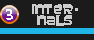
<style>
.page{position:relative;width:94px;height:40px;background:#1b1b1b}
.page>*{position:absolute;margin:0}
.t1{font:12px/11px "Baveuse";color:#cccccc}
</style>
<div class="page">
<p class="t1" style="left:32px;top:4px;width:46px;height:22px;text-align:center">inter-<br>nals</p>
</div>
